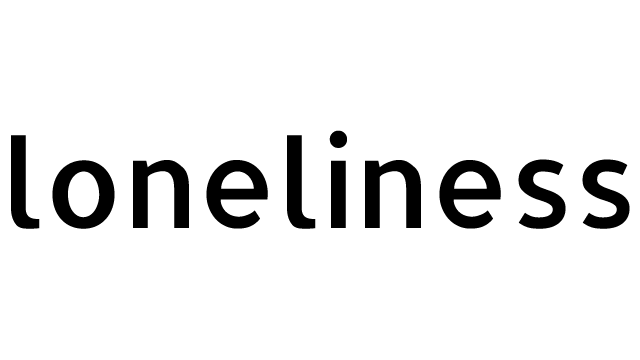
<style>
.page{position:relative;width:640px;height:360px;background:#ffffff}
.page>*{position:absolute;margin:0}
.t1{font:122px "Allerta-Regular";color:#000000}
</style>
<div class="page">
<p class="t1" style="left:11px;top:130px;width:619px;height:99px">loneliness</p>
</div>
